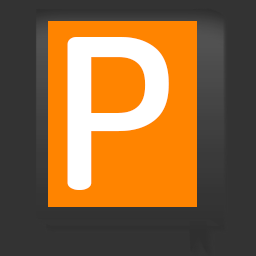
<style>
.page{position:relative;width:256px;height:256px;background:#333333}
.page>*{position:absolute;margin:0}
.t1{font:209.2px "Dosis-SemiBold";color:#ffffff;scale:1.06 1}
</style>
<div class="page">
<p class="t1" style="left:67px;top:37px;width:102px;height:153px">P</p>
</div>
